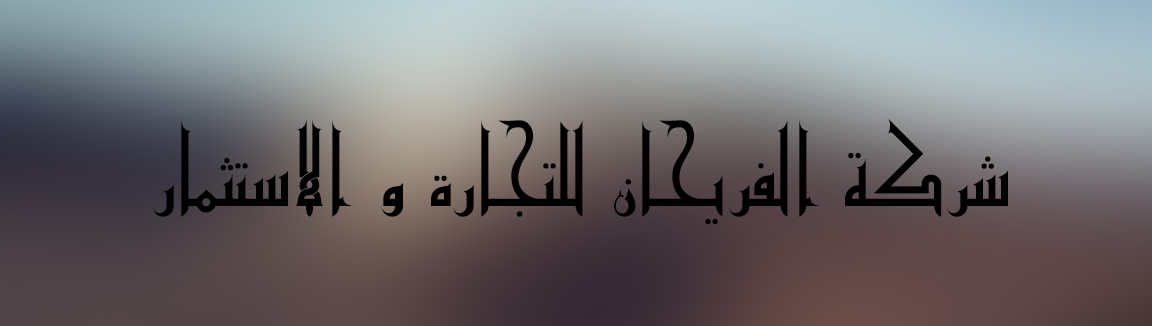
<style>
.page{position:relative;width:1152px;height:326px}
.page>*{position:absolute;margin:0}
.t1{font:100px "OldAnticBold";color:#000000}
</style>
<div class="page">
<p class="t1" style="left:153px;top:118px;width:855px;height:107px">شركة الفريحان للتجارة و الاستثمار</p>
</div>
